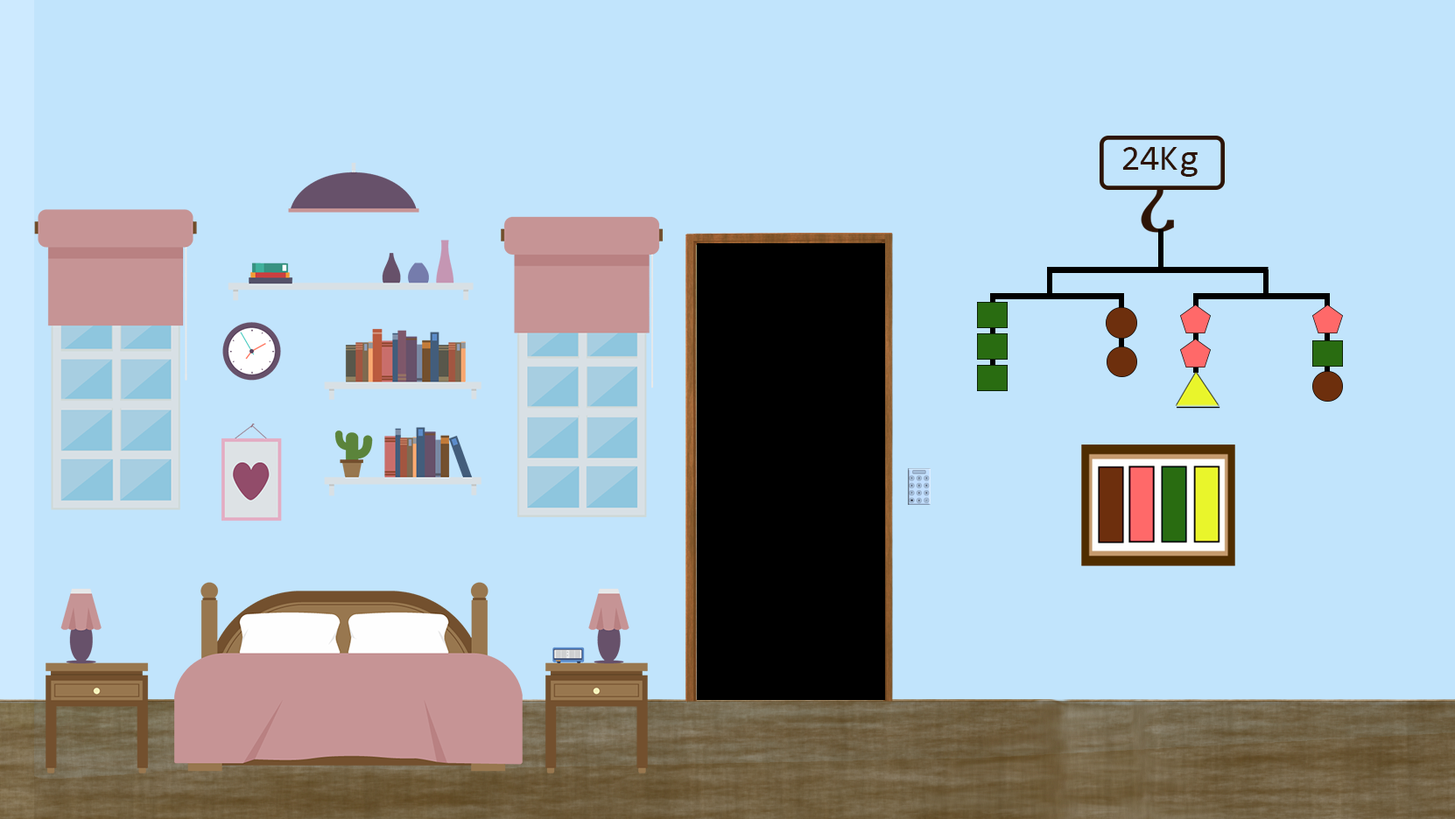
<style>
.page{position:relative;width:1455px;height:819px;background:#c1e4fc}
.page>*{position:absolute;margin:0}
.t1{font:35.6px "Consolas";color:#2d1406}
.t2{font:18.7px "Consolas";color:#000000;scale:4.19 1}
</style>
<div class="page">
<p class="t1" style="left:1122px;top:147px;width:76px;height:30px">24Kg</p>
<p class="t2" style="left:1177px;top:406px;width:43px;height:3px">_</p>
</div>
